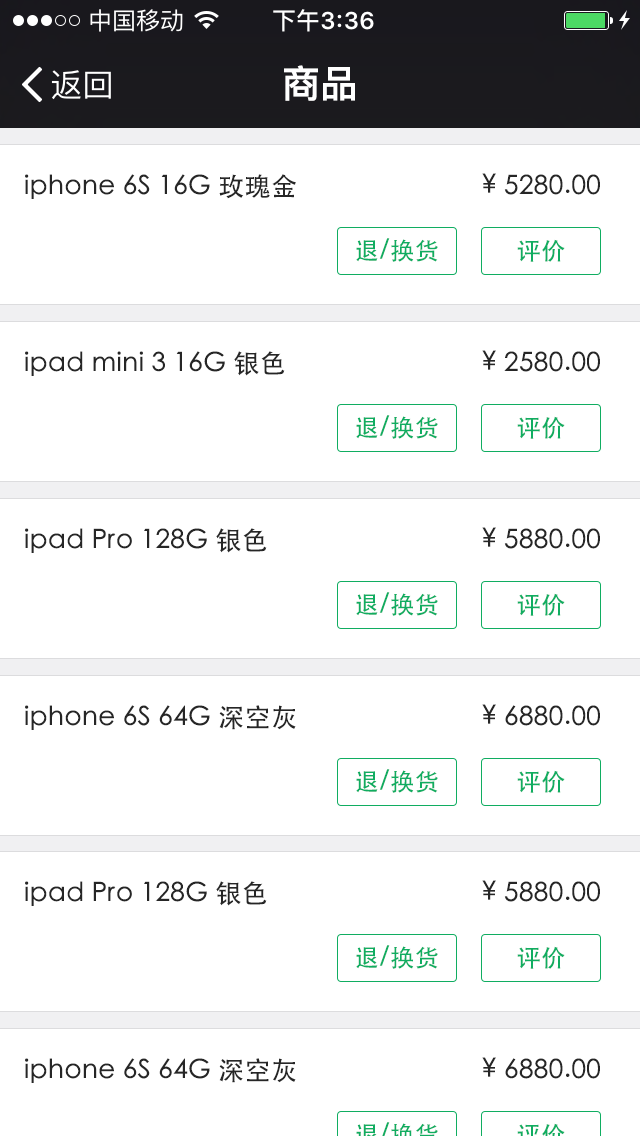
<style>
.page{position:relative;width:640px;height:1136px;background:#ffffff}
.page>*{position:absolute;margin:0}
.t1{font:38px "PingFangSC-Semibold";color:#ffffff}
.t2{font:26px "STHeitiSC-Medium";letter-spacing:0.02em;color:#262626}
.t3{font:24px "STHeitiSC-Medium";letter-spacing:0.02em;color:#10ad61}
</style>
<div class="page">
<p class="t1" style="left:284px;top:65px;width:71px;height:36px">商品</p>
<p class="t2" style="left:25px;top:174px;width:271px;height:25px">iphone 6S 16G 玫瑰金</p>
<p class="t2" style="left:482px;top:173px;width:118px;height:22px">¥ 5280.00</p>
<p class="t3" style="left:356px;top:238px;width:82px;height:24px">退/换货</p>
<p class="t3" style="left:517px;top:239px;width:48px;height:23px">评价</p>
<p class="t2" style="left:25px;top:351px;width:260px;height:25px">ipad mini 3 16G 银色</p>
<p class="t2" style="left:482px;top:350px;width:118px;height:22px">¥ 2580.00</p>
<p class="t3" style="left:356px;top:415px;width:82px;height:24px">退/换货</p>
<p class="t3" style="left:517px;top:416px;width:48px;height:23px">评价</p>
<p class="t2" style="left:25px;top:528px;width:242px;height:25px">ipad Pro 128G 银色</p>
<p class="t2" style="left:482px;top:527px;width:118px;height:22px">¥ 5880.00</p>
<p class="t3" style="left:356px;top:592px;width:82px;height:24px">退/换货</p>
<p class="t3" style="left:517px;top:593px;width:48px;height:23px">评价</p>
<p class="t2" style="left:25px;top:705px;width:271px;height:25px">iphone 6S 64G 深空灰</p>
<p class="t2" style="left:482px;top:704px;width:118px;height:22px">¥ 6880.00</p>
<p class="t3" style="left:356px;top:769px;width:82px;height:24px">退/换货</p>
<p class="t3" style="left:517px;top:770px;width:48px;height:23px">评价</p>
<p class="t2" style="left:25px;top:881px;width:242px;height:25px">ipad Pro 128G 银色</p>
<p class="t2" style="left:482px;top:880px;width:118px;height:22px">¥ 5880.00</p>
<p class="t3" style="left:356px;top:945px;width:82px;height:24px">退/换货</p>
<p class="t3" style="left:517px;top:946px;width:48px;height:23px">评价</p>
<p class="t2" style="left:25px;top:1058px;width:271px;height:25px">iphone 6S 64G 深空灰</p>
<p class="t2" style="left:482px;top:1057px;width:118px;height:22px">¥ 6880.00</p>
</div>
